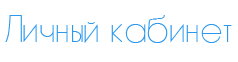
<style>
.page{position:relative;width:238px;height:62px;background:#ffffff}
.page>*{position:absolute;margin:0}
.t1{font:34px "L&CHairlineHQ";letter-spacing:0.001em;color:#2b98ee}
</style>
<div class="page">
<p class="t1" style="left:5px;top:15px;width:227px;height:28px">Личный кабинет</p>
</div>
